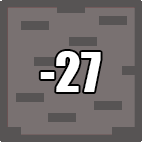
<style>
.page{position:relative;width:142px;height:142px;background:#797171}
.page>*{position:absolute;margin:0}
.t1{font:51px "Impact";color:#ffffff}
</style>
<div class="page">
<p class="t1" style="left:40px;top:51px;width:61px;height:41px">-27</p>
</div>
